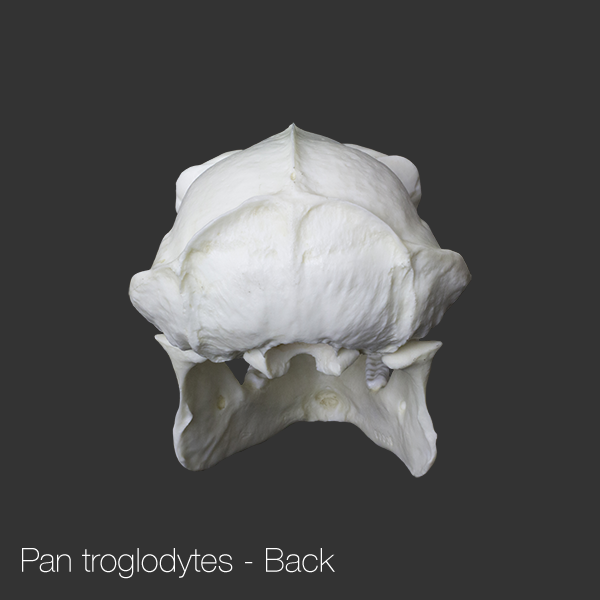
<style>
.page{position:relative;width:600px;height:600px;background:#333333}
.page>*{position:absolute;margin:0}
.t1{font:33.3px "HelveticaNeue-Thin";color:#ffffff}
</style>
<div class="page">
<p class="t1" style="left:22px;top:548px;width:313px;height:31px">Pan troglodytes - Back</p>
</div>
